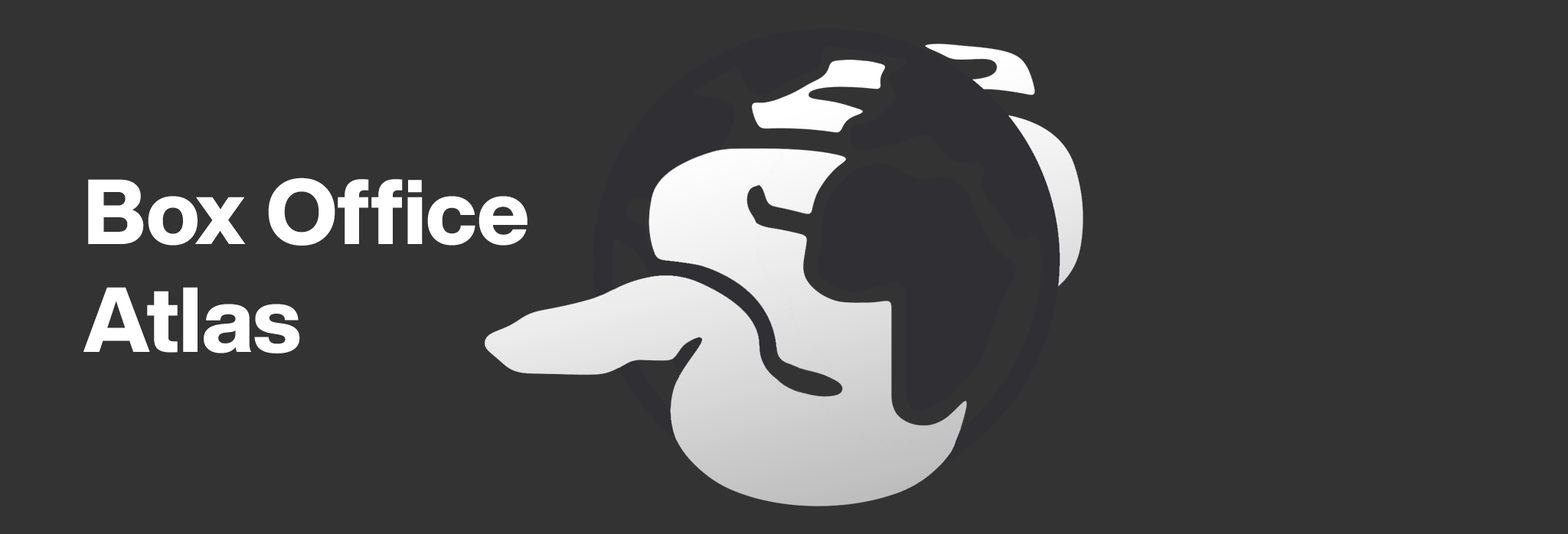
<style>
.page{position:relative;width:1568px;height:534px;background:#333333}
.page>*{position:absolute;margin:0}
.t1{font:90.5px "HelveticaNowDisplay-ExtraBold";color:#ffffff}
</style>
<div class="page">
<p class="t1" style="left:83px;top:178px;width:445px;height:176px">Box Office<br>Atlas</p>
</div>
